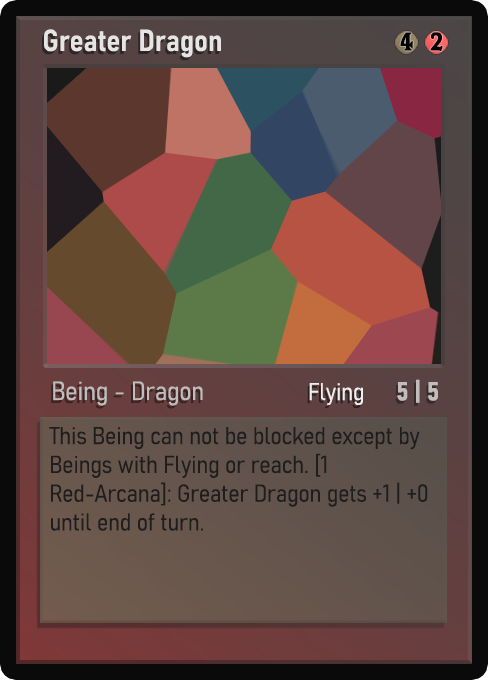
<style>
.page{position:relative;width:488px;height:680px}
.page>*{position:absolute;margin:0}
.t1{font:30px "Bahnschrift-SemiBoldSemiCondensed";color:#f2f2f2;font-weight:bold}
.t2{font:25px "WTRRoycroft";color:#000000;font-weight:bold;scale:1.09 1}
.t3{font:26px "Bahnschrift-LightSemiCondensed";color:#c8c8c8;font-weight:bold}
.t4{font:24px "Bahnschrift-LightSemiCondensed";color:#f0efef;font-weight:bold}
.t5{font:26px "Bahnschrift-BoldSemiCondensed";color:#c1bdbd;font-weight:bold}
.t6{font:24px "Bahnschrift-LightSemiCondensed";color:#1e1e1e;font-weight:bold}
</style>
<div class="page">
<p class="t1" style="left:44px;top:29px;width:177px;height:29px;opacity:0.9">Greater Dragon</p>
<p class="t2" style="left:400px;top:32px;width:13px;height:19px">4</p>
<p class="t2" style="left:430px;top:32px;width:13px;height:19px">2</p>
<p class="t3" style="left:53px;top:381px;width:150px;height:25px;opacity:0.9">Being - Dragon</p>
<p class="t4" style="left:309px;top:383px;width:54px;height:23px">Flying</p>
<p class="t5" style="left:397px;top:379px;width:41px;height:24px">5 | 5</p>
<p class="t6" style="left:49px;top:427px;width:379px;height:104px">This Being can not be blocked except by Beings with Flying or reach. [1 Red-Arcana]: Greater Dragon gets +1 | +0 until end of turn.</p>
</div>
